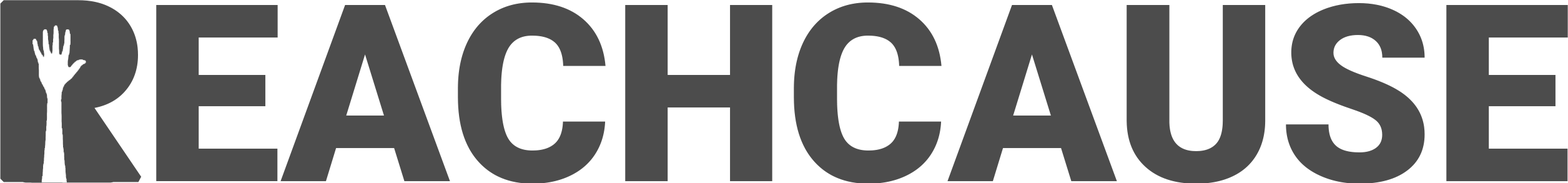
<style>
.page{position:relative;width:1568px;height:183px;background:#4c4c4c}
.page>*{position:absolute;margin:0}
.t1{font:247.3px "Roboto-Black";color:#4c4c4c;text-transform:uppercase}
</style>
<div class="page">
<p class="t1" style="left:156px;top:2px;width:1412px;height:182px">EACHCAUSE</p>
</div>
